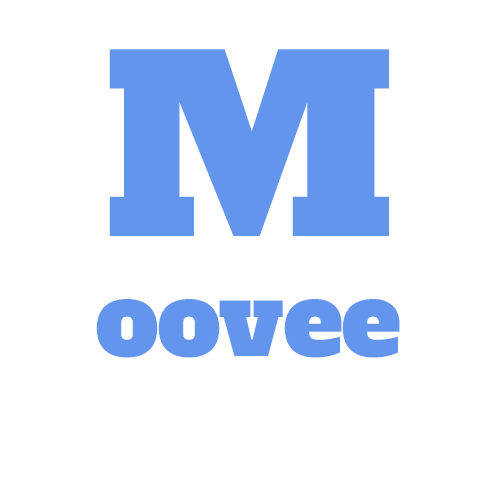
<style>
.page{position:relative;width:500px;height:500px;background:#ffffff}
.page>*{position:absolute;margin:0}
.t1{font:100px "AlfaSlabOne-Regular";color:#6495ed}
.t2{font:240px "AlfaSlabOne-Regular";color:#6495ed}
</style>
<div class="page">
<p class="t1" style="left:96px;top:49px;width:304px;height:309px;text-align:center"><span class="t2">M<br></span>oovee</p>
</div>
